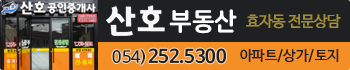
<style>
.page{position:relative;width:350px;height:70px;background:#1f2022}
.page>*{position:absolute;margin:0}
.t1{font:25px "NanumSquareRoundOTFEB";color:#ffffff}
.t2{font:15px "NanumBarunGothicOTF";letter-spacing:-0.025em;color:#9f8d37}
.t3{font:18px "NanumBarunGothicOTFBold";color:#1f2022}
.t4{font:16px "NanumBarunGothicOTF";color:#1f2022}
.t5{font:14px "NanumBarunGothicOTF";color:#1f2022}
</style>
<div class="page">
<p class="t1" style="left:169px;top:9px;width:68px;height:25px">부동산</p>
<p class="t2" style="left:246px;top:14px;width:95px;height:15px">효자동 전문상담</p>
<p class="t3" style="left:112px;top:48px;width:114px;height:17px"><span class="t4">054)</span>252.5300</p>
<p class="t5" style="left:240px;top:49px;width:99px;height:14px">아파트/상가/토지</p>
</div>
